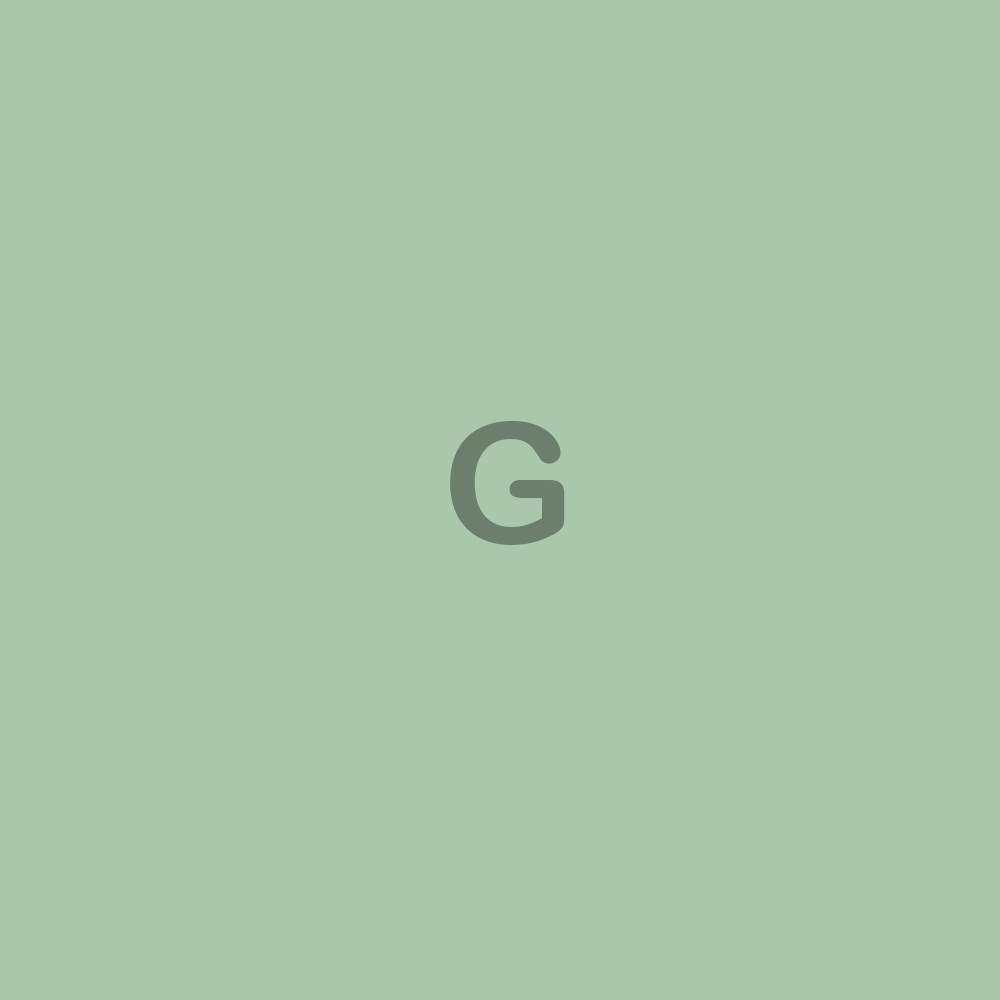
<style>
.page{position:relative;width:1000px;height:1000px;background:#abc7ab}
.page>*{position:absolute;margin:0}
.t1{font:166.7px "ArialRoundedMTBold";color:#6c7e6c}
</style>
<div class="page">
<p class="t1" style="left:450px;top:421px;width:115px;height:124px">G</p>
</div>
